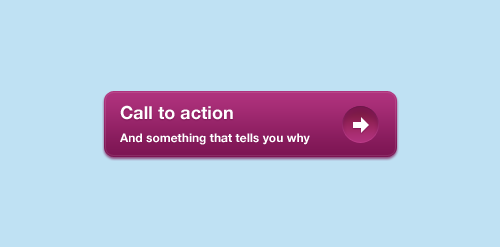
<style>
.page{position:relative;width:500px;height:247px;background:#bfe1f3}
.page>*{position:absolute;margin:0}
.t1{font:18px "HelveticaNeue-Bold";color:#ffffff}
.t2{font:12px "HelveticaNeue-Bold";color:#ffffff}
</style>
<div class="page">
<p class="t1" style="left:120px;top:105px;width:113px;height:15px">Call to action</p>
<p class="t2" style="left:120px;top:133px;width:190px;height:12px">And something that tells you why</p>
</div>
